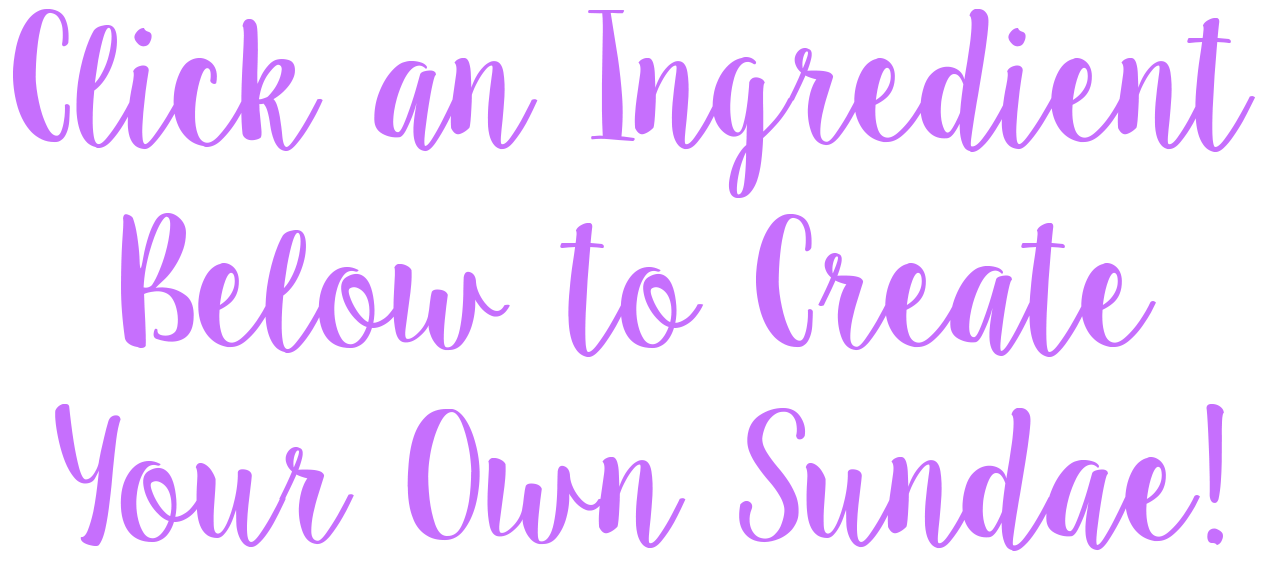
<style>
.page{position:relative;width:1271px;height:583px;background:#ffffff}
.page>*{position:absolute;margin:0}
.t1{font:171.8px "Sweet_Pea";color:#c66ffd}
</style>
<div class="page">
<p class="t1" style="left:13px;top:9px;width:1243px;height:189px">Click an Ingredient</p>
<p class="t1" style="left:121px;top:213px;width:1035px;height:144px">Below to Create</p>
<p class="t1" style="left:55px;top:404px;width:1169px;height:147px">Your Own Sundae!</p>
</div>
